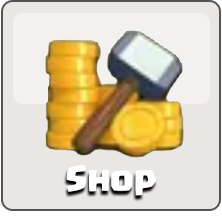
<style>
.page{position:relative;width:222px;height:216px;background:#e9e6e4}
.page>*{position:absolute;margin:0}
.t1{font:26.4px "Supercell-Magic";color:#ffffff}
</style>
<div class="page">
<p class="t1" style="left:66px;top:165px;width:90px;height:31px">Shop</p>
</div>
